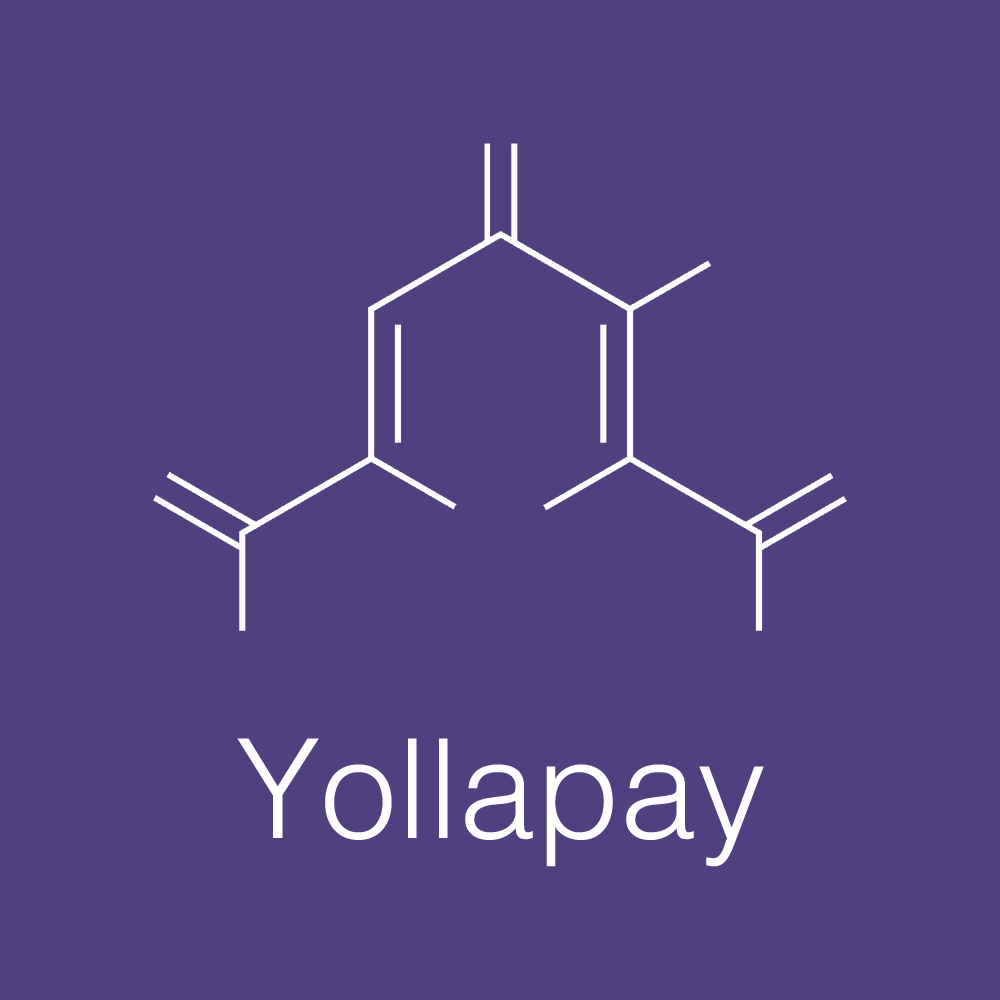
<style>
.page{position:relative;width:1000px;height:1000px;background:#51407f}
.page>*{position:absolute;margin:0}
.t1{font:138.2px "Helvetica-Light";color:#ffffff}
</style>
<div class="page">
<p class="t1" style="left:237px;top:738px;width:527px;height:129px">Yollapay</p>
</div>
